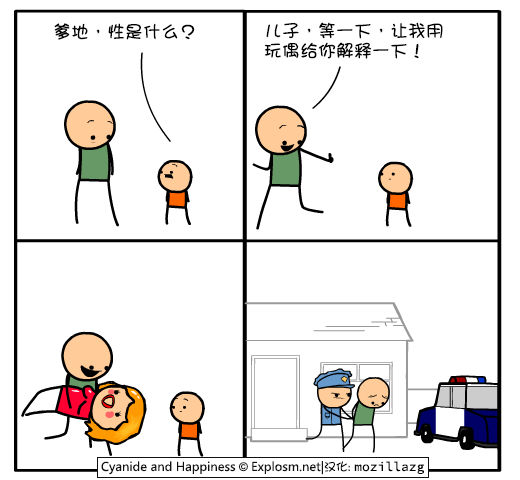
<style>
.page{position:relative;width:520px;height:480px;background:#ffffff}
.page>*{position:absolute;margin:0}
.t1{font:18px "DFGirl";color:#000000}
.t2{font:18px/20px "DFGirl";color:#000000}
</style>
<div class="page">
<p class="t1" style="left:54px;top:23px;width:141px;height:17px">爹地，性是什么？</p>
<p class="t2" style="left:264px;top:22px;width:179px;height:37px">儿子，等一下，让我用<br>玩偶给你解释一下！</p>
</div>
